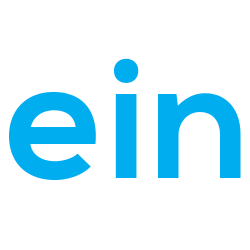
<style>
.page{position:relative;width:250px;height:250px;background:#ffffff}
.page>*{position:absolute;margin:0}
.t1{font:169px "NexaBold";letter-spacing:0.025em;color:#00aeef}
</style>
<div class="page">
<p class="t1" style="left:9px;top:58px;width:232px;height:122px">ein</p>
</div>
